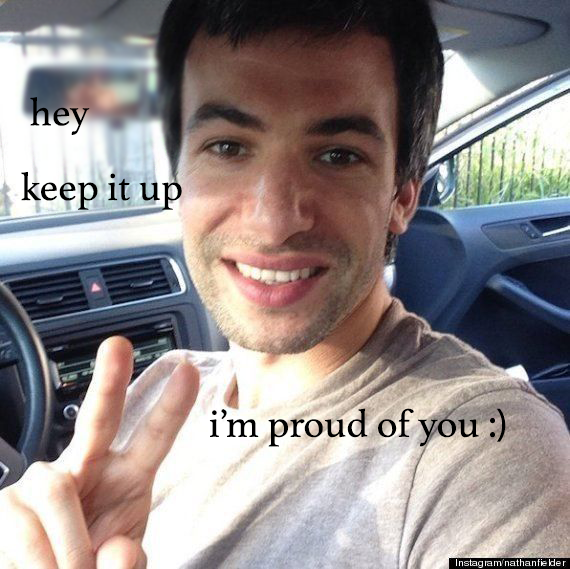
<style>
.page{position:relative;width:570px;height:569px}
.page>*{position:absolute;margin:0}
.t1{font:40px "Athelas-Regular";color:#000000}
.t2{font:40px "MyriadPro-Regular";color:#000000}
</style>
<div class="page">
<p class="t1" style="left:30px;top:97px;width:60px;height:38px">hey</p>
<p class="t1" style="left:21px;top:171px;width:161px;height:39px">keep it up</p>
<p class="t1" style="left:209px;top:408px;width:297px;height:39px">i’m proud of you <span class="t2">:)</span></p>
</div>
